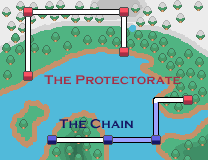
<style>
.page{position:relative;width:208px;height:160px;background:#51bada}
.page>*{position:absolute;margin:0}
.t1{font:13.3px "CopperplateGothic-Bold";color:#a23047}
.t2{font:13.3px "CopperplateGothic-Bold";color:#161667}
</style>
<div class="page">
<p class="t1" style="left:44px;top:74px;width:137px;height:11px">The Protectorate</p>
<p class="t2" style="left:59px;top:118px;width:75px;height:11px">The Chain</p>
</div>
